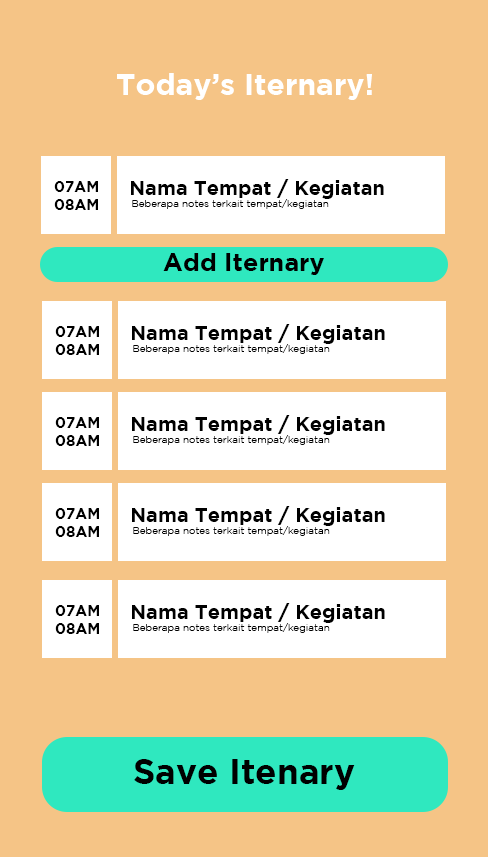
<style>
.page{position:relative;width:488px;height:857px;background:#f5c486}
.page>*{position:absolute;margin:0}
.t1{font:30px "Gotham-Bold";color:#ffffff}
.t2{font:15px "Gotham-Bold";color:#000000}
.t3{font:20px "Gotham-Bold";color:#000000}
.t4{font:10px "Gotham-Light";color:#000000}
.t5{font:25px "Gotham-Bold";color:#000000}
.t6{font:35px "Gotham-Bold";color:#000000}
</style>
<div class="page">
<p class="t1" style="left:117px;top:73px;width:255px;height:27px">Today’s Iternary!</p>
<p class="t2" style="left:54px;top:181px;width:44px;height:29px;text-align:center">07AM<br>08AM</p>
<p class="t3" style="left:131px;top:179px;width:253px;height:20px">Nama Tempat / Kegiatan</p>
<p class="t4" style="left:132px;top:199px;width:197px;height:10px">Beberapa notes terkait tempat/kegiatan</p>
<p class="t5" style="left:163px;top:253px;width:161px;height:22px">Add Iternary</p>
<p class="t2" style="left:55px;top:326px;width:44px;height:29px;text-align:center">07AM<br>08AM</p>
<p class="t3" style="left:132px;top:324px;width:253px;height:20px">Nama Tempat / Kegiatan</p>
<p class="t4" style="left:133px;top:344px;width:197px;height:10px">Beberapa notes terkait tempat/kegiatan</p>
<p class="t2" style="left:55px;top:417px;width:44px;height:29px;text-align:center">07AM<br>08AM</p>
<p class="t3" style="left:132px;top:415px;width:253px;height:20px">Nama Tempat / Kegiatan</p>
<p class="t4" style="left:133px;top:435px;width:197px;height:10px">Beberapa notes terkait tempat/kegiatan</p>
<p class="t2" style="left:55px;top:508px;width:44px;height:29px;text-align:center">07AM<br>08AM</p>
<p class="t3" style="left:132px;top:506px;width:253px;height:20px">Nama Tempat / Kegiatan</p>
<p class="t4" style="left:133px;top:526px;width:197px;height:10px">Beberapa notes terkait tempat/kegiatan</p>
<p class="t2" style="left:55px;top:605px;width:44px;height:29px;text-align:center">07AM<br>08AM</p>
<p class="t3" style="left:132px;top:603px;width:253px;height:20px">Nama Tempat / Kegiatan</p>
<p class="t4" style="left:133px;top:623px;width:197px;height:10px">Beberapa notes terkait tempat/kegiatan</p>
<p class="t6" style="left:134px;top:759px;width:221px;height:31px">Save Itenary</p>
</div>
